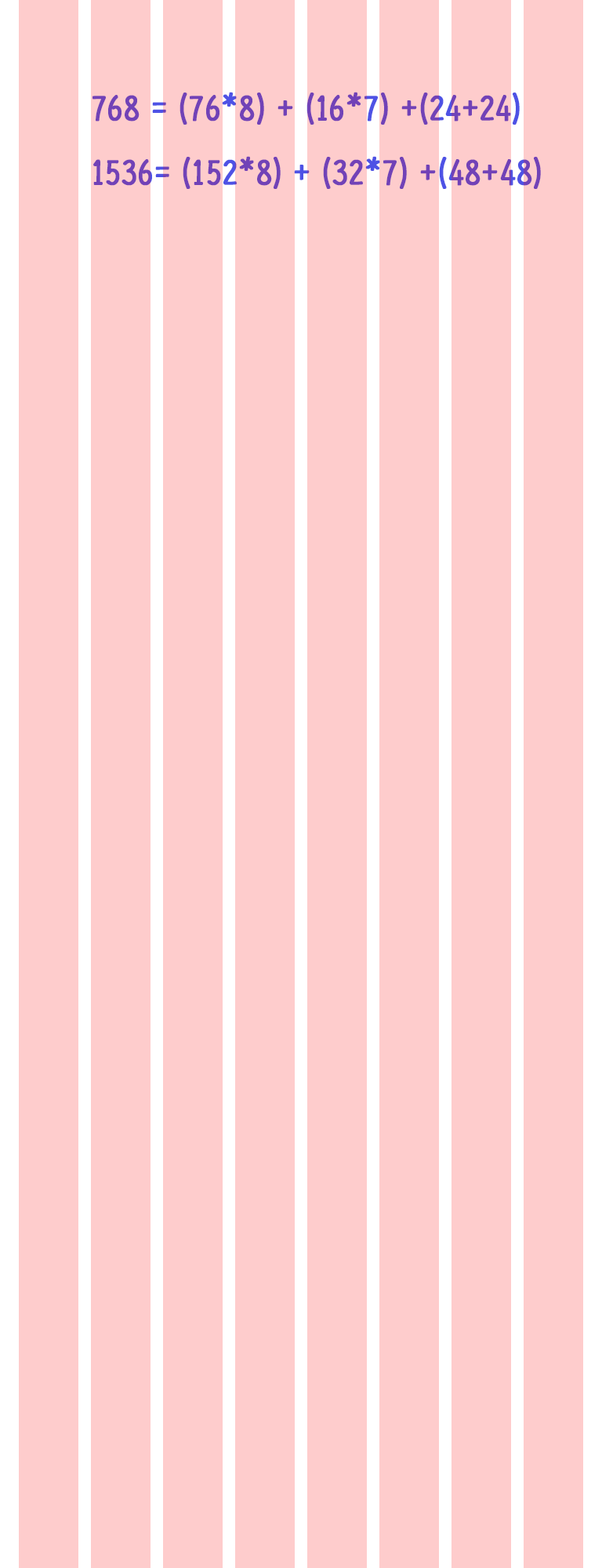
<style>
.page{position:relative;width:602px;height:1568px;background:#fecccc}
.page>*{position:absolute;margin:0}
.t1{font:37.6px "KoreanEMPJ-B";letter-spacing:-0.05em;color:#7142b7;font-weight:bold}
</style>
<div class="page">
<p class="t1" style="left:93px;top:92px;width:427px;height:33px">768 = (76*8) + (16*7) +(24+24)</p>
<p class="t1" style="left:93px;top:156px;width:448px;height:33px">1536= (152*8) + (32*7) +(48+48)</p>
</div>
